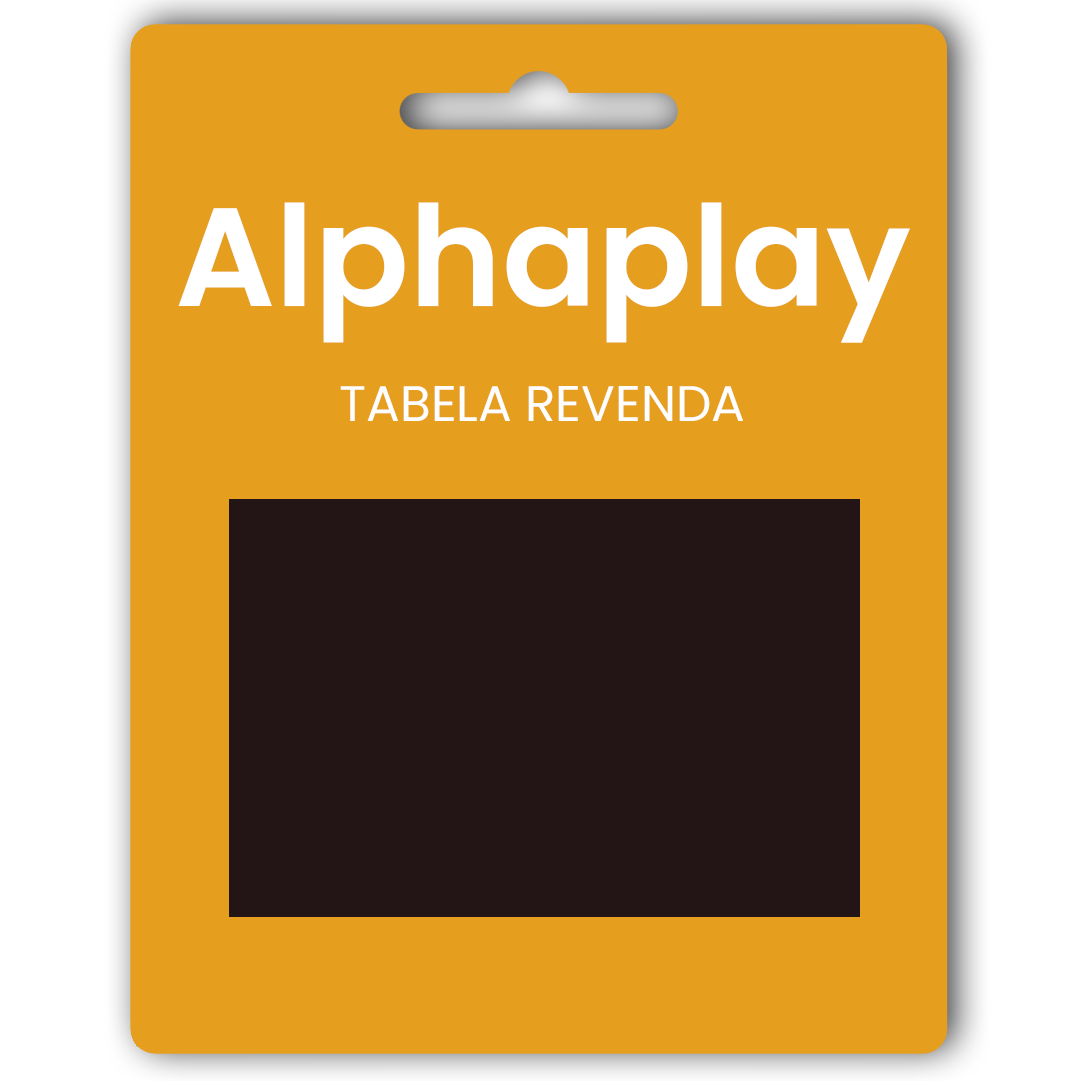
<style>
.page{position:relative;width:1081px;height:1081px;background:#e59e1e}
.page>*{position:absolute;margin:0}
.t1{font:139.9px "Poppins-SemiBold";color:#ffffff}
.t2{font:50px "Poppins-Regular";color:#fffefe}
</style>
<div class="page">
<p class="t1" style="left:178px;top:202px;width:732px;height:141px">Alphaplay</p>
<p class="t2" style="left:340px;top:386px;width:403px;height:35px">TABELA REVENDA</p>
</div>
